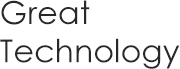
<style>
.page{position:relative;width:180px;height:69px;background:#ffffff}
.page>*{position:absolute;margin:0}
.t1{font:31.8px "CenturyGothic";color:#282828}
</style>
<div class="page">
<p class="t1" style="left:0px;top:0px;width:180px;height:69px">Great<br>Technology</p>
</div>
